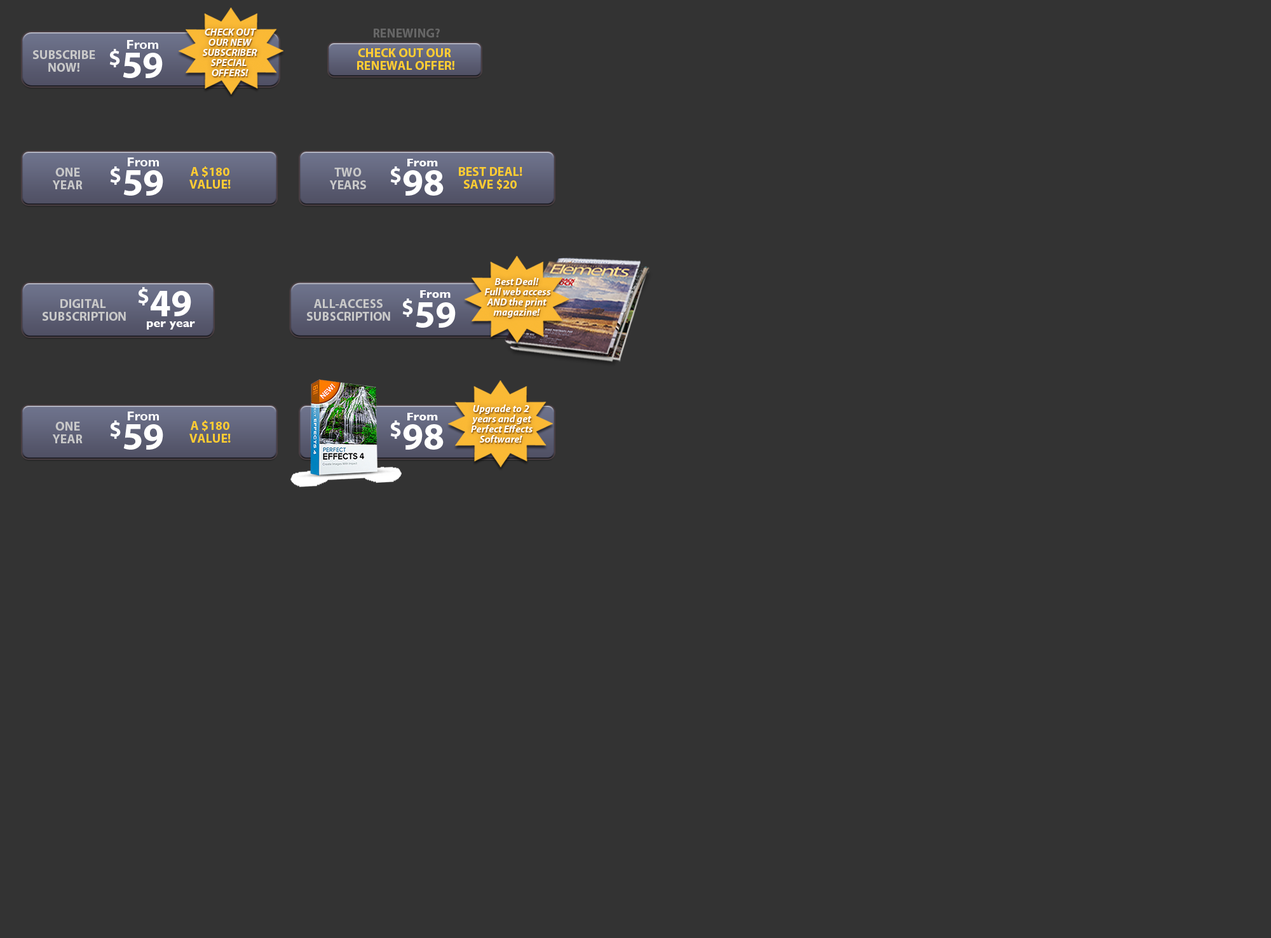
<style>
.page{position:relative;width:1271px;height:938px;background:#333333}
.page>*{position:absolute;margin:0}
.t1{font:10.2px/10.2px "MyriadPro-BoldIt";color:#ffffff}
.t2{font:12.8px "MyriadPro-Bold";color:#666666}
.t3{font:12.7px "GillSans-Bold";color:#ffffff}
.t4{font:12.8px/12.8px "MyriadPro-Bold";color:#c8c8c8}
.t5{font:38.1px "MyriadPro-Bold";color:#ffffff}
.t6{font:12.8px/12.8px "MyriadPro-Bold";color:#ffcc33}
.t7{font:11.4px "GillSans-Bold";color:#ffffff}
.t8{font:12.7px/12.7px "MyriadPro-Bold";color:#c8c8c8}
</style>
<div class="page">
<p class="t1" style="left:202px;top:29px;width:55px;height:47px;text-align:center">CHECK OUT<br>OUR NEW<br>SUBSCRIBER<br>SPECIAL <br>OFFERS!</p>
<p class="t2" style="left:374px;top:29px;width:66px;height:8px">RENEWING?</p>
<p class="t3" style="left:127px;top:40px;width:31px;height:9px">From</p>
<p class="t4" style="left:32px;top:50px;width:63px;height:22px;text-align:center">SUBSCRIBE<br>NOW!</p>
<p class="t5" style="left:109px;top:49px;width:54px;height:29px">$59</p>
<p class="t6" style="left:357px;top:48px;width:97px;height:22px;text-align:center">CHECK OUT OUR <br>RENEWAL OFFER!</p>
<p class="t3" style="left:128px;top:158px;width:31px;height:8px">From</p>
<p class="t7" style="left:407px;top:159px;width:31px;height:7px">From</p>
<p class="t4" style="left:52px;top:168px;width:31px;height:21px;text-align:center">ONE<br>YEAR</p>
<p class="t5" style="left:110px;top:166px;width:53px;height:30px">$59</p>
<p class="t6" style="left:189px;top:166px;width:42px;height:23px;text-align:center">A $180<br>VALUE!</p>
<p class="t4" style="left:329px;top:168px;width:37px;height:21px;text-align:center">TWO<br>YEARS</p>
<p class="t5" style="left:390px;top:166px;width:53px;height:30px">$98</p>
<p class="t6" style="left:459px;top:167px;width:63px;height:23px;text-align:center">BEST DEAL!<br>SAVE $20</p>
<p class="t1" style="left:484px;top:278px;width:67px;height:40px;text-align:center">Best Deal! <br>Full web access<br>AND the print <br>magazine!</p>
<p class="t5" style="left:138px;top:287px;width:53px;height:29px">$49</p>
<p class="t7" style="left:420px;top:290px;width:30px;height:8px">From</p>
<p class="t8" style="left:42px;top:299px;width:84px;height:22px;text-align:center">DIGITAL <br>SUBSCRIPTION</p>
<p class="t8" style="left:306px;top:299px;width:84px;height:22px;text-align:center">ALL-ACCESS<br>SUBSCRIPTION</p>
<p class="t5" style="left:402px;top:299px;width:54px;height:29px">$59</p>
<p class="t7" style="left:147px;top:321px;width:48px;height:9px">per year</p>
<p class="t3" style="left:128px;top:412px;width:31px;height:9px">From</p>
<p class="t7" style="left:407px;top:413px;width:31px;height:8px">From</p>
<p class="t1" style="left:471px;top:405px;width:61px;height:38px;text-align:center">Upgrade to 2 <br>years and get<br>Perfect Effects<br>Software!</p>
<p class="t4" style="left:52px;top:422px;width:31px;height:21px;text-align:center">ONE<br>YEAR</p>
<p class="t5" style="left:110px;top:421px;width:53px;height:29px">$59</p>
<p class="t6" style="left:189px;top:421px;width:42px;height:22px;text-align:center">A $180<br>VALUE!</p>
<p class="t5" style="left:390px;top:421px;width:53px;height:29px">$98</p>
</div>
